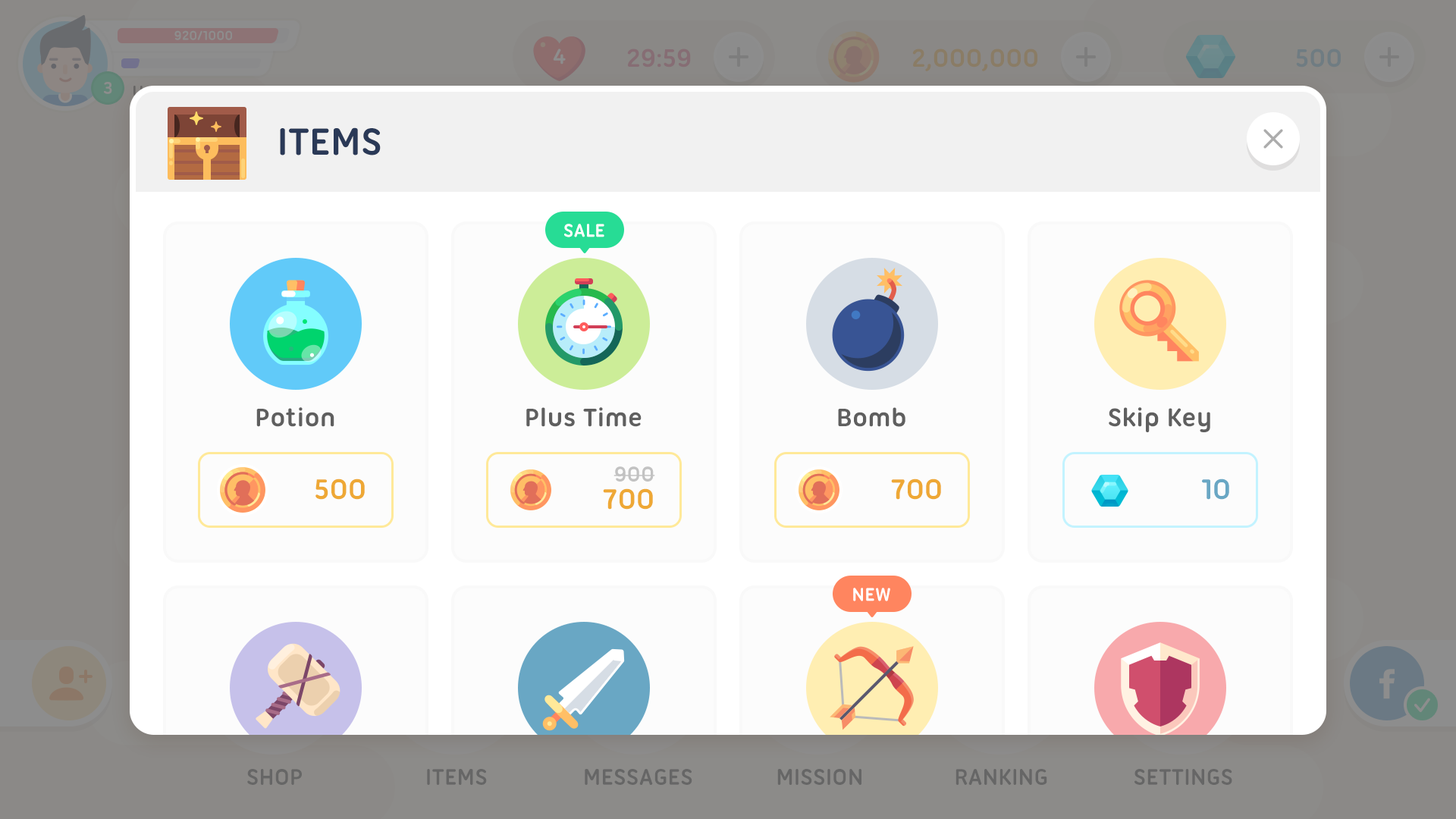
<style>
.page{position:relative;width:1456px;height:819px;background:#fcfcfc}
.page>*{position:absolute;margin:0}
.t1{font:40.9px "UbuntuTitling-Bold";color:#2a3957;text-transform:uppercase}
.t2{font:19.7px "UbuntuTitling-Bold";color:#ffffff;text-transform:uppercase}
.t3{font:27.3px "UbuntuTitling-Bold";color:#5f5f5f}
.t4{font:22.7px "UbuntuTitling-Bold";color:#c2c2c2;text-transform:uppercase}
.t5{font:30.3px "UbuntuTitling-Bold";color:#eea835;text-transform:uppercase}
.t6{font:30.3px "UbuntuTitling-Bold";color:#69a7c4;text-transform:uppercase}
</style>
<div class="page">
<p class="t1" style="left:280px;top:127px;width:101px;height:28px">items</p>
<p class="t2" style="left:564px;top:224px;width:40px;height:13px">sale</p>
<p class="t3" style="left:256px;top:407px;width:78px;height:20px">Potion</p>
<p class="t3" style="left:526px;top:407px;width:116px;height:20px">Plus Time</p>
<p class="t3" style="left:838px;top:407px;width:67px;height:20px">Bomb</p>
<p class="t3" style="left:1109px;top:407px;width:101px;height:25px">Skip Key</p>
<p class="t4" style="left:613px;top:466px;width:42px;height:16px">900</p>
<p class="t5" style="left:315px;top:479px;width:50px;height:21px">500</p>
<p class="t5" style="left:891px;top:479px;width:50px;height:21px">700</p>
<p class="t6" style="left:1202px;top:479px;width:27px;height:21px">10</p>
<p class="t5" style="left:603px;top:488px;width:50px;height:22px">700</p>
<p class="t2" style="left:853px;top:588px;width:37px;height:13px">new</p>
</div>
